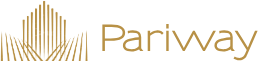
<style>
.page{position:relative;width:258px;height:61px;background:#ffffff}
.page>*{position:absolute;margin:0}
.t1{font:35px "Sansumi-Bold";color:#b89146}
</style>
<div class="page">
<p class="t1" style="left:102px;top:23px;width:156px;height:38px">Pariway</p>
</div>
